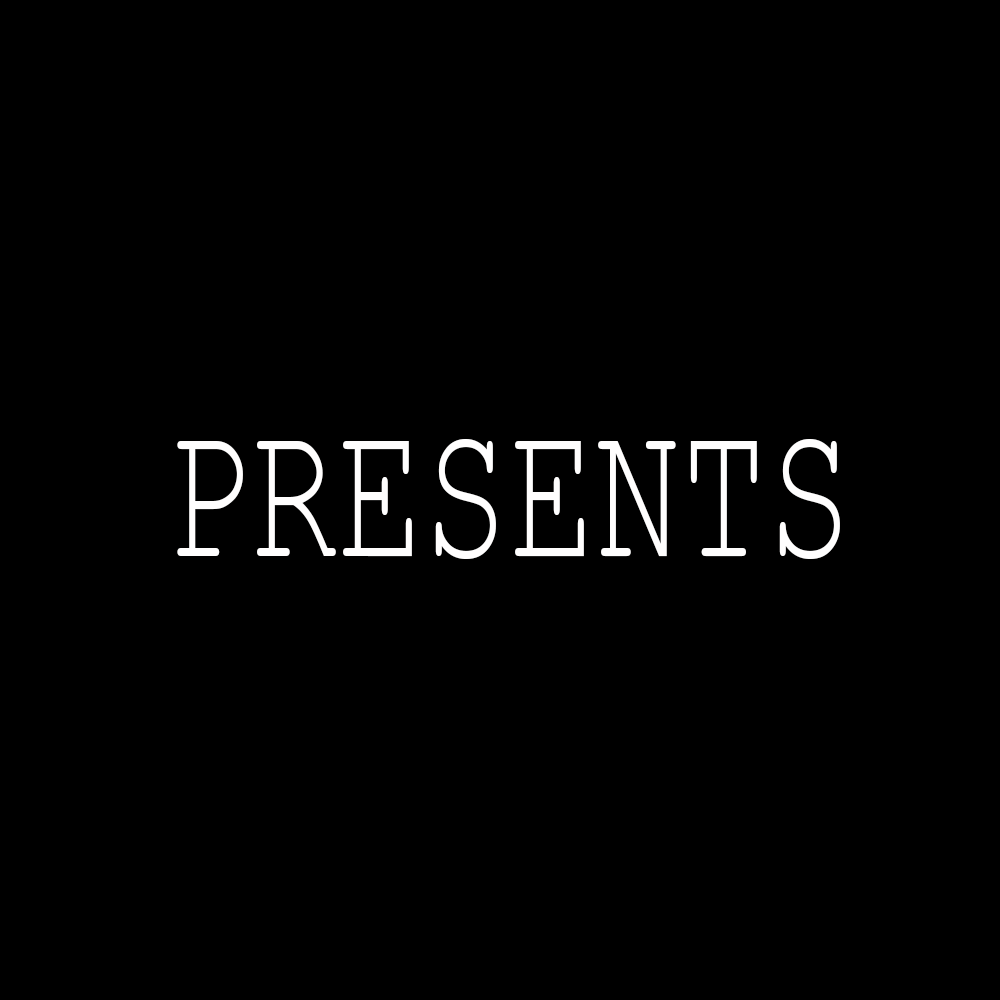
<style>
.page{position:relative;width:1000px;height:1000px;background:#000000}
.page>*{position:absolute;margin:0}
.t1{font:201px "CourierNewPSMT";color:#fffefe;scale:0.71 1}
</style>
<div class="page">
<p class="t1" style="left:177px;top:439px;width:663px;height:120px">PRESENTS</p>
</div>
